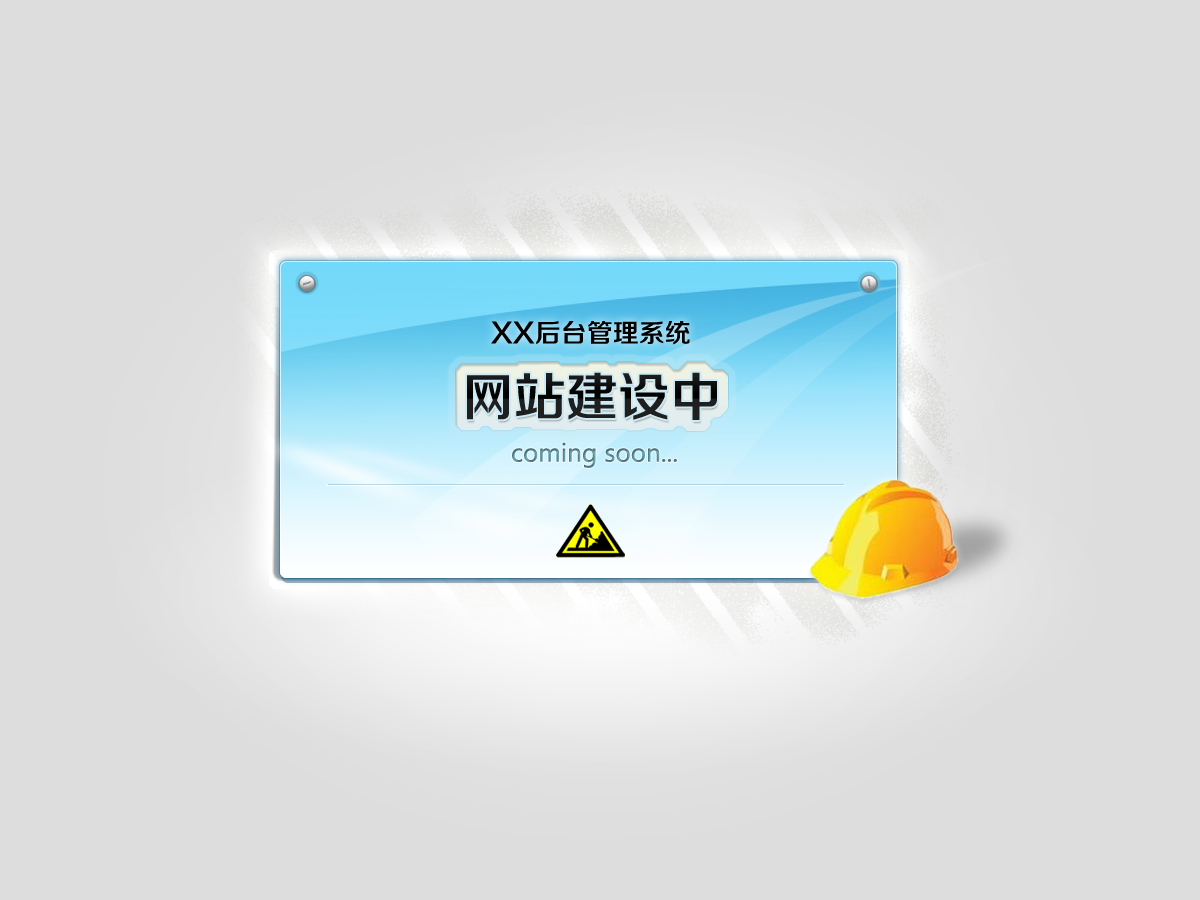
<style>
.page{position:relative;width:1200px;height:900px;background:#dddddd}
.page>*{position:absolute;margin:0}
.t1{font:26px "FZZZHONGJW--GB1-0";color:#000000}
.t2{font:52px "FZZZHONGJW--GB1-0";color:#1a1a1a}
.t3{font:24px "MicrosoftYaHei"}
</style>
<div class="page">
<p class="t1" style="left:491px;top:321px;width:199px;height:24px">XX后台管理系统</p>
<p class="t2" style="left:467px;top:372px;width:250px;height:48px">网站建设中</p>
<p class="t3" style="left:512px;top:442px;width:165px;height:26px">coming soon...</p>
</div>
